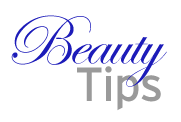
<style>
.page{position:relative;width:181px;height:122px;background:#ffffff}
.page>*{position:absolute;margin:0}
.t1{font:72px "EdwardianScriptITC";letter-spacing:-0.025em;color:#1c1bb9}
.t2{font:48px "Interstate-Regular";letter-spacing:-0.025em;color:#9a9a9a}
</style>
<div class="page">
<p class="t1" style="left:11px;top:15px;width:156px;height:72px">Beauty</p>
<p class="t2" style="left:77px;top:66px;width:84px;height:45px">Tips</p>
</div>
